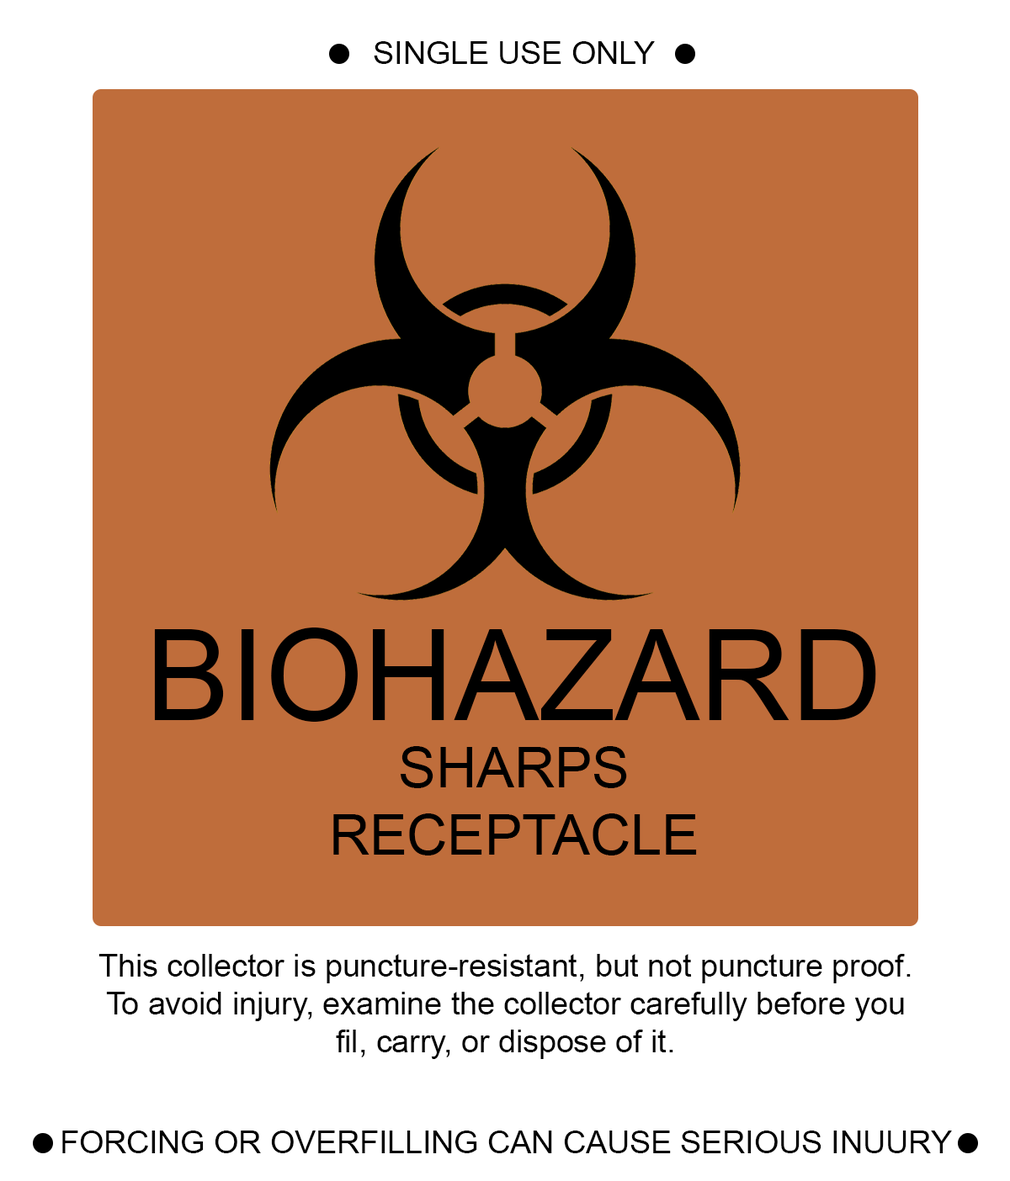
<style>
.page{position:relative;width:1010px;height:1181px;background:#bf6d3b}
.page>*{position:absolute;margin:0}
.t1{font:31.5px "ArialMT";color:#000000}
.t2{font:56.1px "ArialMT";color:#000000}
.t3{font:126.2px "ArialMT";color:#000000}
</style>
<div class="page">
<p class="t1" style="left:374px;top:41px;width:281px;height:23px">SINGLE USE ONLY</p>
<p class="t2" style="left:154px;top:628px;width:722px;height:228px;text-align:center"><span class="t3">BIOHAZARD<br></span>SHARPS<br>RECEPTACLE</p>
<p class="t1" style="left:98px;top:954px;width:812px;height:105px;text-align:center">This collector is puncture-resistant, but not puncture proof.<br>To avoid injury, examine the collector carefully before you fil, carry, or dispose of it.</p>
<p class="t1" style="left:62px;top:1131px;width:889px;height:22px">FORCING OR OVERFILLING CAN CAUSE SERIOUS INUURY</p>
</div>
